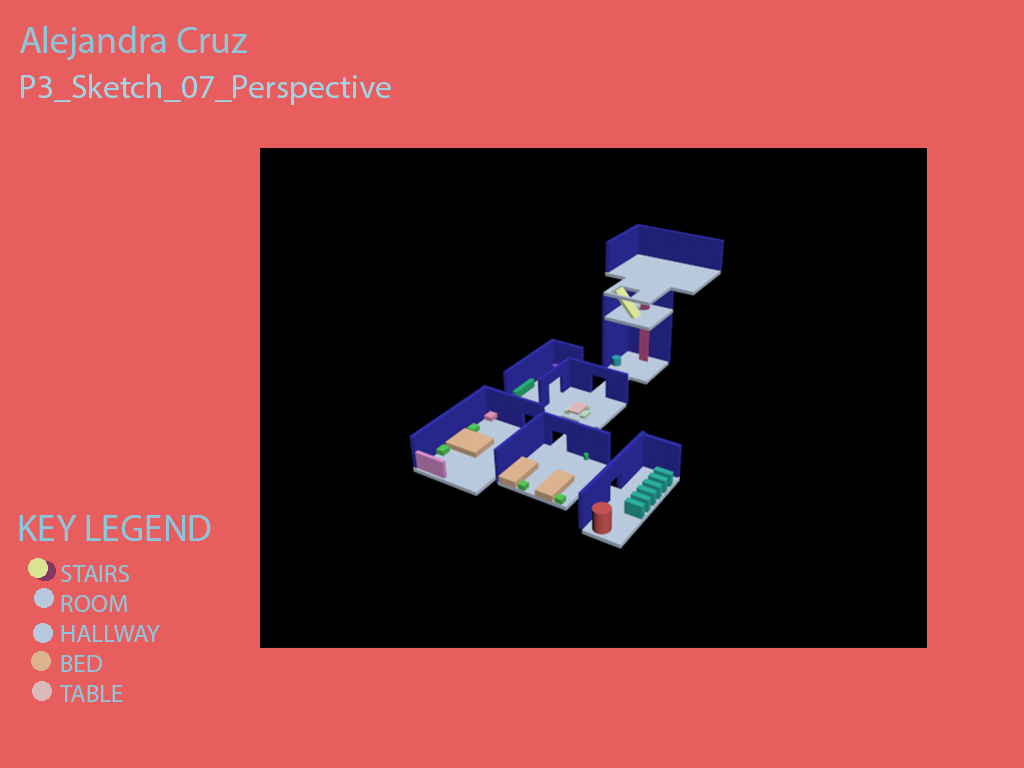
<style>
.page{position:relative;width:1024px;height:768px;background:#e85e5e}
.page>*{position:absolute;margin:0}
.t1{font:37.5px "MyriadPro-Regular";color:#89c8dc}
.t2{font:33.3px "MyriadPro-Regular";color:#9ed6e8}
.t3{font:25px "MyriadPro-Regular";color:#89c8dc}
</style>
<div class="page">
<p class="t1" style="left:20px;top:26px;width:227px;height:34px">Alejandra Cruz</p>
<p class="t2" style="left:21px;top:74px;width:370px;height:31px">P3_Sketch_07_Perspective</p>
<p class="t1" style="left:19px;top:515px;width:192px;height:26px">KEY LEGEND</p>
<p class="t3" style="left:60px;top:565px;width:100px;height:137px">STAIRS<br>ROOM<br>HALLWAY<br>BED<br>TABLE</p>
</div>
